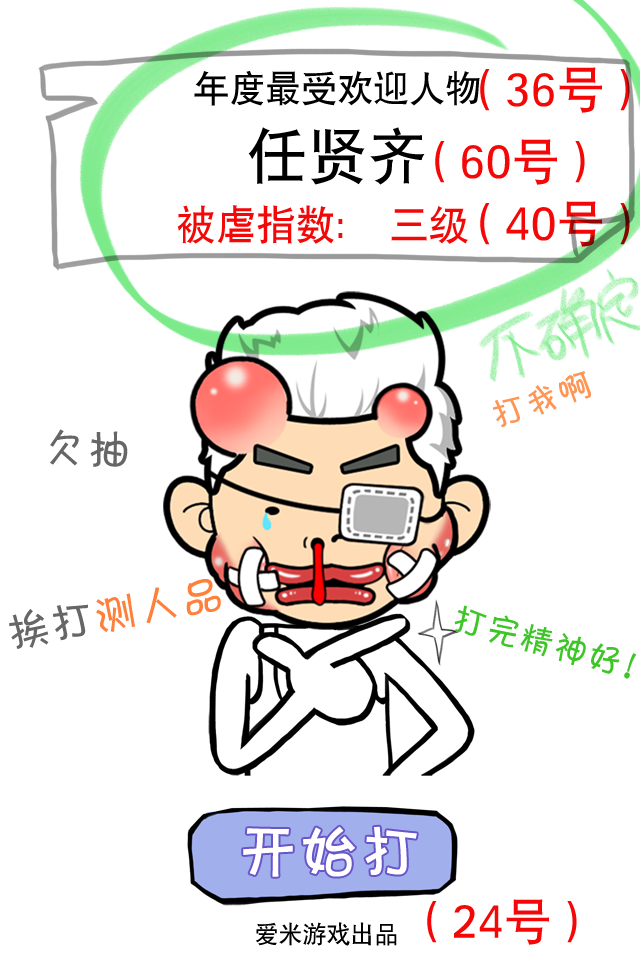
<style>
.page{position:relative;width:640px;height:960px;background:#ffffff}
.page>*{position:absolute;margin:0}
.t1{font:36px "SIL-Hei-Med-Jian";color:#000000}
.t2{font:48.4px "SIL-Hei-Med-Jian";color:#f40707}
.t3{font:60px "SIL-Hei-Med-Jian";color:#000000}
.t4{font:40px "SIL-Hei-Med-Jian";color:#f40707}
.t5{font:35px "FZKATFW--GB1-0";color:#ff9555}
.t6{font:44px "FZKATFW--GB1-0";color:#666666}
.t7{font:44px "FZKATJW--GB1-0";color:#ff803b}
.t8{font:44px "FZKATJW--GB1-0";color:#666666}
.t9{font:35px "FZKATFW--GB1-0";color:#3ec527}
.t10{font:60px "FZKATJW--GB1-0";color:#ffffff;font-weight:bold}
.t11{font:24px "SIL-Hei-Med-Jian";color:#000000}
</style>
<div class="page">
<p class="t1" style="left:194px;top:71px;width:286px;height:35px">年度最受欢迎人物</p>
<p class="t2" style="left:480px;top:67px;width:150px;height:46px">（36号）</p>
<p class="t3" style="left:248px;top:127px;width:177px;height:58px">任贤齐</p>
<p class="t2" style="left:435px;top:139px;width:150px;height:46px">（60号）</p>
<p class="t4" style="left:177px;top:205px;width:291px;height:39px">被虐指数： 三级</p>
<p class="t2" style="left:480px;top:201px;width:150px;height:46px">（40号）</p>
<p class="t5" style="left:492px;top:371px;width:99px;height:57px;rotate:-19deg">打我啊</p>
<p class="t6" style="left:50px;top:429px;width:78px;height:38px;rotate:2deg">欠抽</p>
<p class="t7" style="left:9px;top:579px;width:212px;height:70px;rotate:-11deg"><span class="t8">挨打</span>测人品</p>
<p class="t9" style="left:454px;top:605px;width:183px;height:74px;rotate:15deg">打完精神好！</p>
<p class="t10" style="left:243px;top:826px;width:174px;height:51px">开始打</p>
<p class="t2" style="left:427px;top:899px;width:150px;height:46px">（24号）</p>
<p class="t11" style="left:256px;top:922px;width:141px;height:24px">爱米游戏出品</p>
</div>
